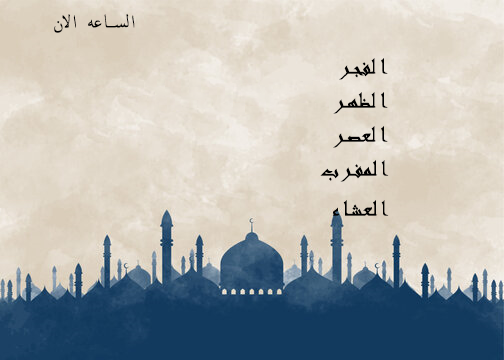
<style>
.page{position:relative;width:504px;height:360px}
.page>*{position:absolute;margin:0}
.t1{font:25px "ArabicTypesetting";letter-spacing:0.1em;color:#000000;text-transform:uppercase}
.t2{font:25px "Andalus";letter-spacing:0.1em;color:#000000;text-transform:uppercase}
</style>
<div class="page">
<p class="t1" style="left:54px;top:13px;width:81px;height:20px">الساعه الان</p>
<p class="t2" style="left:339px;top:58px;width:49px;height:22px">الفجر</p>
<p class="t2" style="left:333px;top:92px;width:55px;height:22px">الظهر</p>
<p class="t2" style="left:333px;top:126px;width:55px;height:22px">العصر</p>
<p class="t2" style="left:320px;top:160px;width:69px;height:22px">المفرب</p>
<p class="t2" style="left:332px;top:200px;width:57px;height:16px">العشاء</p>
</div>
